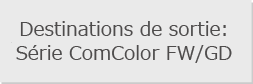
<style>
.page{position:relative;width:253px;height:84px;background:#eaeaea}
.page>*{position:absolute;margin:0}
.t1{font:19px/24px "Meiryo";color:#4e4c4c}
</style>
<div class="page">
<p class="t1" style="left:16px;top:21px;width:216px;height:42px;text-align:center">Destinations de sortie:<br>Série ComColor FW/GD</p>
</div>
